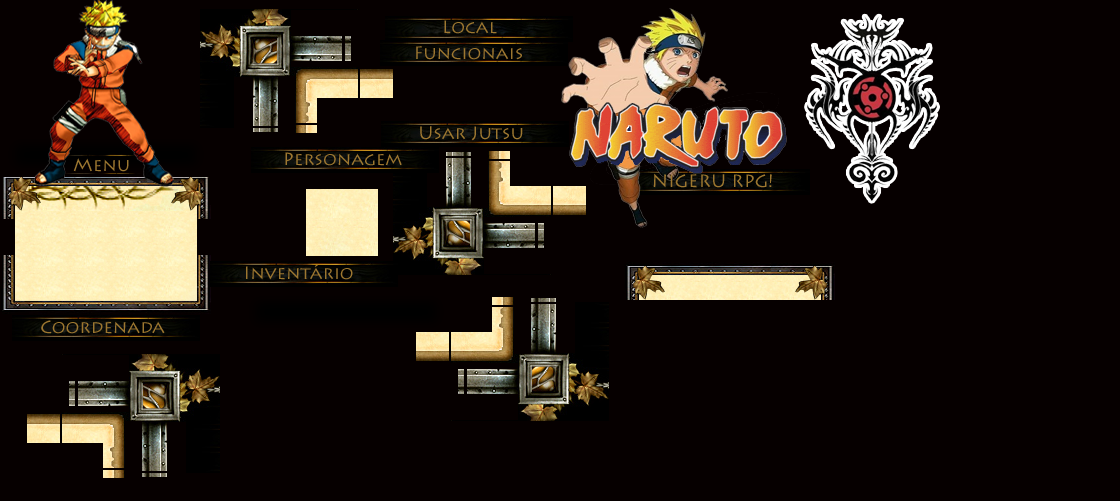
<style>
.page{position:relative;width:1120px;height:501px;background:#060000}
.page>*{position:absolute;margin:0}
.t1{font:18px "LithosPro-Regular";color:#9d7730}
</style>
<div class="page">
<p class="t1" style="left:444px;top:20px;width:53px;height:14px">Local</p>
<p class="t1" style="left:416px;top:46px;width:106px;height:14px">Funcionais</p>
<p class="t1" style="left:420px;top:126px;width:103px;height:15px">Usar Jutsu</p>
<p class="t1" style="left:73px;top:158px;width:56px;height:14px">Menu</p>
<p class="t1" style="left:285px;top:152px;width:117px;height:14px">Personagem</p>
<p class="t1" style="left:653px;top:173px;width:119px;height:15px">NIGERU RPG!</p>
<p class="t1" style="left:246px;top:264px;width:107px;height:16px">Inventário</p>
<p class="t1" style="left:41px;top:320px;width:124px;height:14px">Coordenada</p>
</div>
